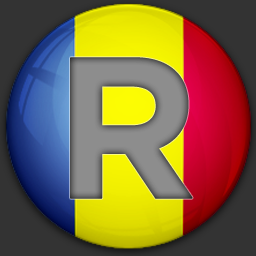
<style>
.page{position:relative;width:256px;height:256px}
.page>*{position:absolute;margin:0}
.t1{font:200px "Gotham-Bold";color:#8c8c8c;font-weight:bold}
</style>
<div class="page">
<p class="t1" style="left:70px;top:57px;width:123px;height:142px">R</p>
</div>
